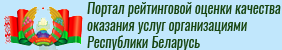
<style>
.page{position:relative;width:282px;height:50px;background:#c1e7fc}
.page>*{position:absolute;margin:0}
.t1{font:14px "Oswald-RegularItalic";color:#17440f}
</style>
<div class="page">
<p class="t1" style="left:87px;top:2px;width:194px;height:49px">Портал рейтинговой оценки качества<br>оказания услуг организациями<br>Республики Беларусь</p>
</div>
